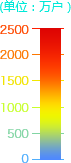
<style>
.page{position:relative;width:71px;height:163px;background:#ffffff}
.page>*{position:absolute;margin:0}
.t1{font:12px "MicrosoftYaHei";color:#00e9d8}
.t2{font:11px "HiraginoSansGB-W3";color:#ff4800}
.t3{font:11px "HiraginoSansGB-W3";color:#fc7800}
.t4{font:11px "HiraginoSansGB-W3";color:#f1e300}
.t5{font:11px "HiraginoSansGB-W3";color:#c7ff2e}
.t6{font:11px "HiraginoSansGB-W3";color:#82d5a4}
.t7{font:11px "HiraginoSansGB-W3";color:#4faefd}
</style>
<div class="page">
<p class="t1" style="left:0px;top:0px;width:71px;height:13px">(单位：万户）</p>
<p class="t2" style="left:0px;top:25px;width:29px;height:9px">2500</p>
<p class="t3" style="left:0px;top:50px;width:29px;height:9px">2000</p>
<p class="t4" style="left:1px;top:76px;width:28px;height:9px">1500</p>
<p class="t5" style="left:1px;top:103px;width:28px;height:9px">1000</p>
<p class="t6" style="left:7px;top:129px;width:22px;height:9px">500</p>
<p class="t7" style="left:21px;top:154px;width:8px;height:9px">0</p>
</div>
